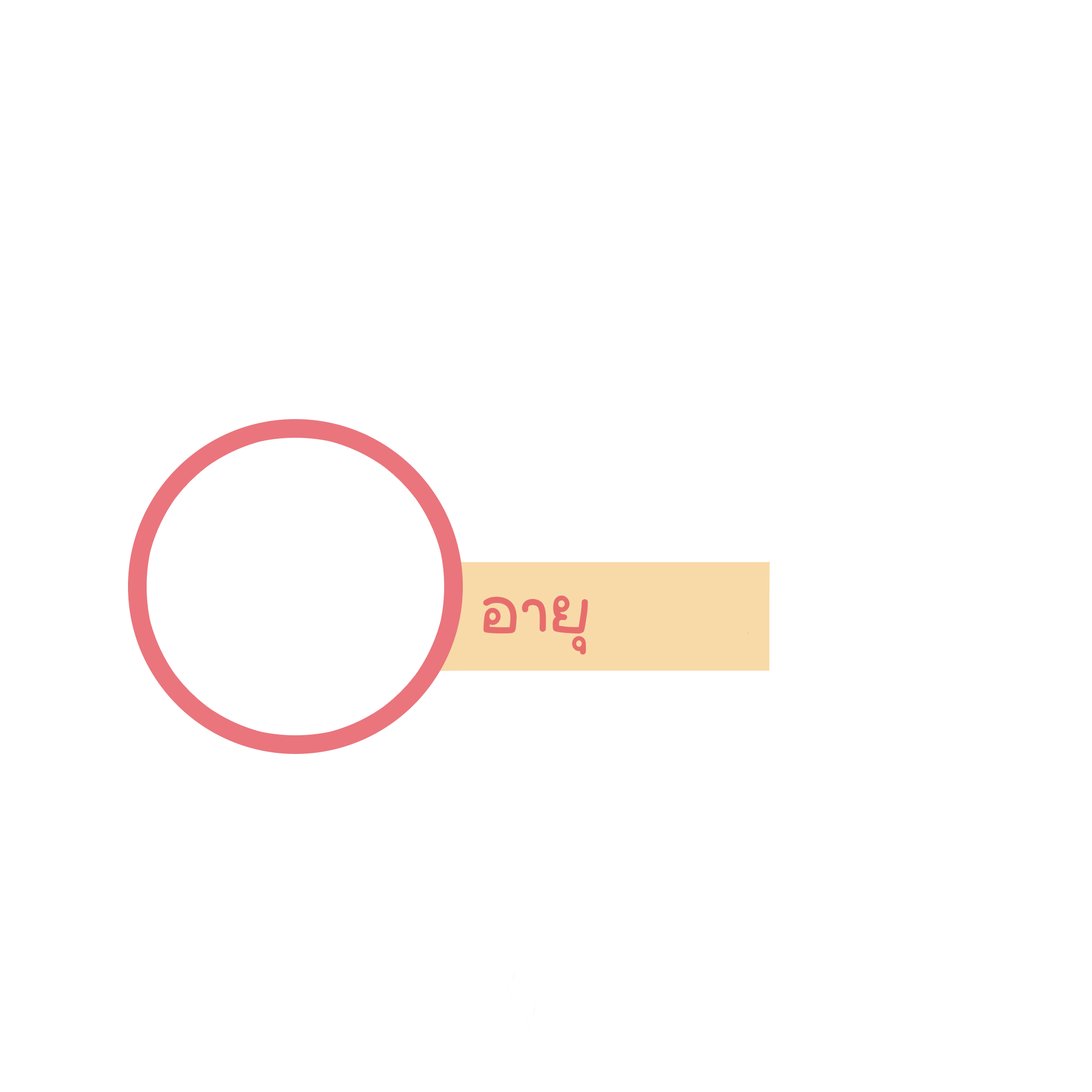
<style>
.page{position:relative;width:1092px;height:1092px;background:#ffffff}
.page>*{position:absolute;margin:0}
.t1{font:67px "MNMelon-Regular";color:#e76d6d}
</style>
<div class="page">
<p class="t1" style="left:483px;top:596px;width:105px;height:59px">อายุ</p>
</div>
